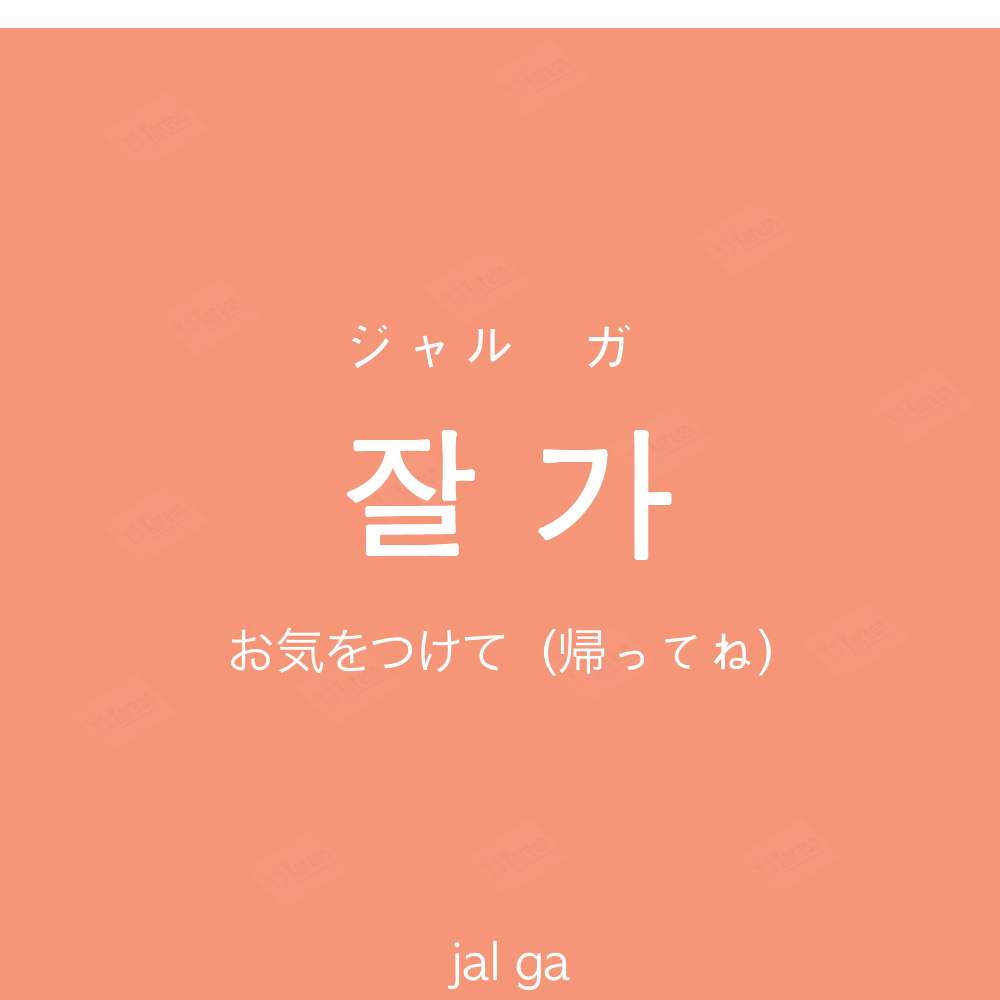
<style>
.page{position:relative;width:1000px;height:1000px;background:#f69679}
.page>*{position:absolute;margin:0}
.t1{font:60px "AppleGothic";color:#ffffff}
.t2{font:140px "AppleGothic";color:#ffffff;font-weight:bold}
.t3{font:50px "HiraKakuProN-W3";color:#ffffff}
.t4{font:50px "AppleGothic";color:#ffffff}
</style>
<div class="page">
<p class="t1" style="left:352px;top:324px;width:278px;height:44px">ジャル　ガ</p>
<p class="t2" style="left:346px;top:430px;width:326px;height:130px">잘 가</p>
<p class="t3" style="left:231px;top:627px;width:540px;height:49px">お気をつけて<span class="t4">（</span>帰<span class="t4">ってね）</span></p>
<p class="t4" style="left:448px;top:940px;width:122px;height:51px">jal ga</p>
</div>
